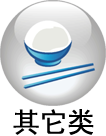
<style>
.page{position:relative;width:106px;height:136px;background:#ffffff}
.page>*{position:absolute;margin:0}
.t1{font:28px "SimHei";letter-spacing:-0.025em;color:#000000}
</style>
<div class="page">
<p class="t1" style="left:13px;top:109px;width:81px;height:26px">其它类</p>
</div>
